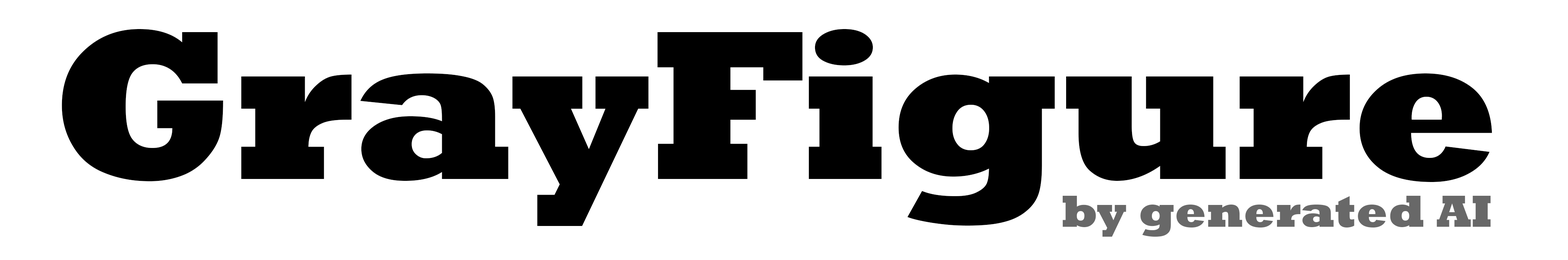
<style>
.page{position:relative;width:1568px;height:260px;background:#ffffff}
.page>*{position:absolute;margin:0}
.t1{font:216.8px "Rockwell-ExtraBold";color:#000000}
.t2{font:45.9px "Rockwell-ExtraBold";color:#686868}
</style>
<div class="page">
<p class="t1" style="left:62px;top:29px;width:1430px;height:197px">GrayFigure</p>
<p class="t2" style="left:1063px;top:196px;width:428px;height:41px">by generated AI</p>
</div>
